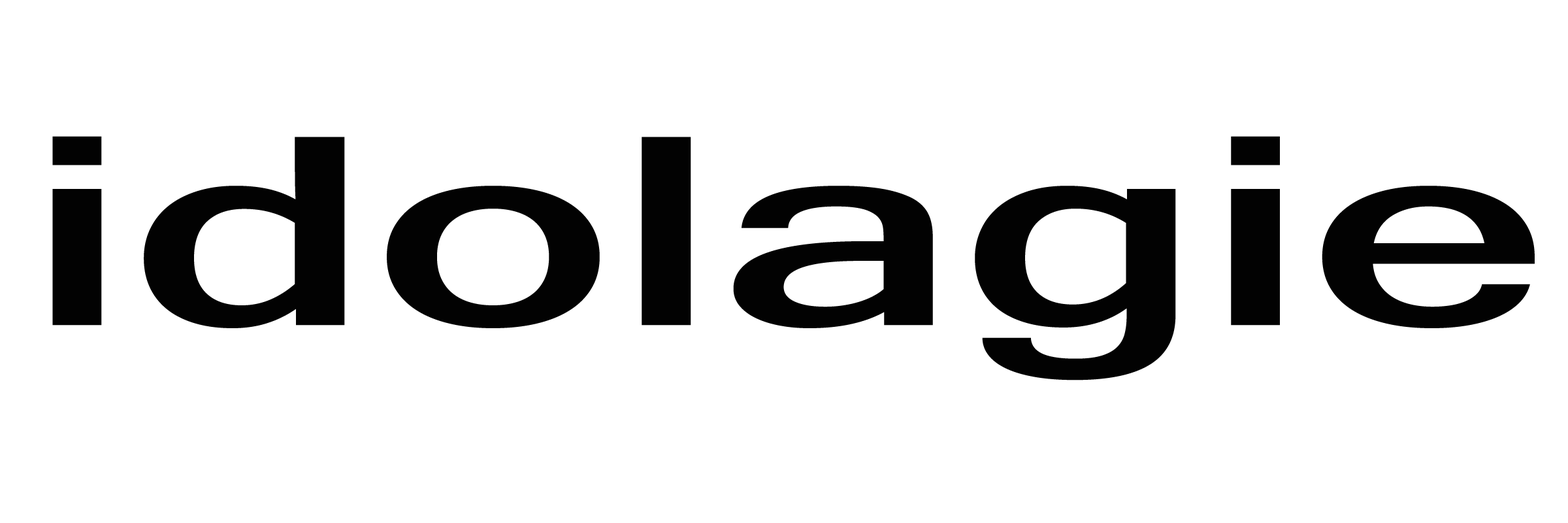
<style>
.page{position:relative;width:1568px;height:523px;background:#ffffff}
.page>*{position:absolute;margin:0}
.t1{font:283.5px "Shruti-Bold";color:#020202;scale:1.61 1}
</style>
<div class="page">
<p class="t1" style="left:52px;top:136px;width:1483px;height:244px">idolagie</p>
</div>
